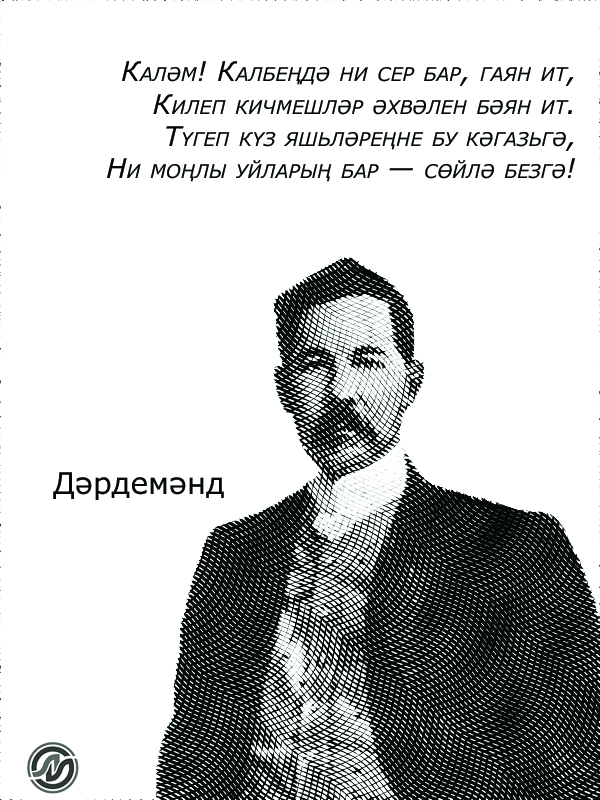
<style>
.page{position:relative;width:600px;height:800px;background:#ffffff}
.page>*{position:absolute;margin:0}
.t1{font:27px "Verdana-Italic";color:#050708;font-variant:small-caps}
.t2{font:30px "Verdana";color:#050708}
</style>
<div class="page">
<p class="t1" style="left:107px;top:61px;width:468px;height:121px;text-align:right">Каләм! Калбеңдә ни сер бар, гаян ит,<br>Килеп кичмешләр әхвәлен бәян ит.<br>Түгеп күз яшьләреңне бу кәгазьгә,<br>Ни моңлы уйларың бар — сөйлә безгә!</p>
<p class="t2" style="left:53px;top:472px;width:171px;height:28px">Дәрдемәнд</p>
</div>
